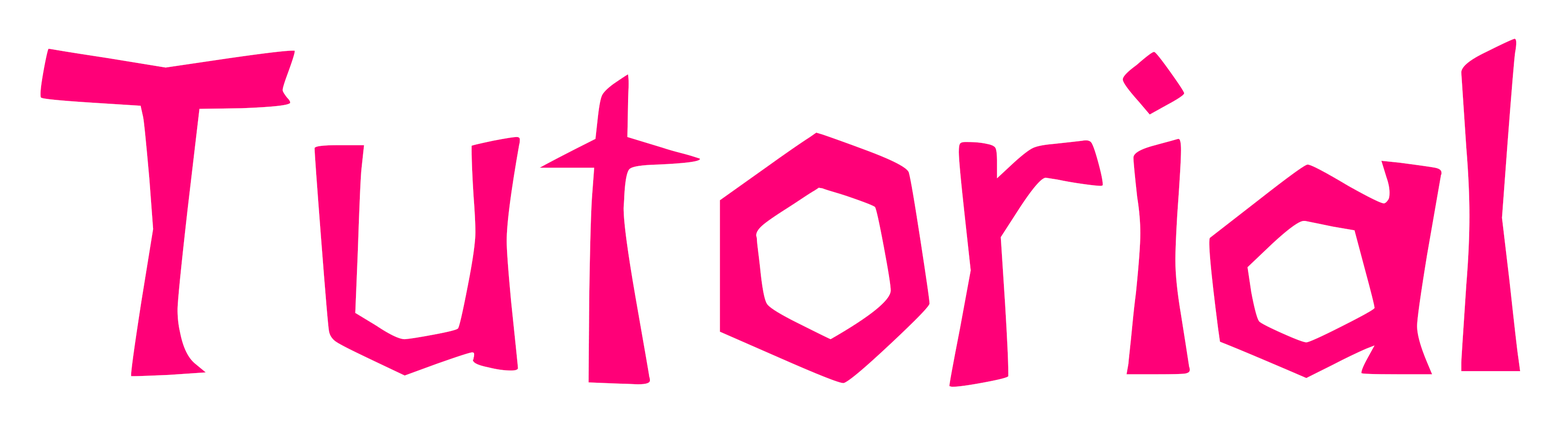
<style>
.page{position:relative;width:1568px;height:437px;background:#ffffff}
.page>*{position:absolute;margin:0}
.t1{font:625.7px "BasebrawlMain-Regular";color:#ff0078}
</style>
<div class="page">
<p class="t1" style="left:40px;top:38px;width:1481px;height:349px">Tutorial</p>
</div>
